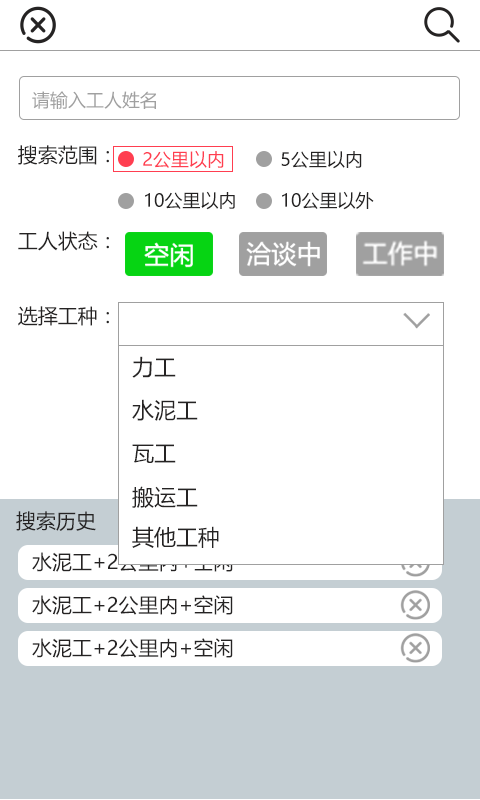
<style>
.page{position:relative;width:480px;height:800px;background:#ffffff}
.page>*{position:absolute;margin:0}
.t1{font:18px "MicrosoftYaHei";color:#a0a0a0}
.t2{font:20px "MicrosoftYaHei";color:#252323}
.t3{font:18px "MicrosoftYaHei";color:#ff3e50}
.t4{font:18px "MicrosoftYaHei";color:#252323}
.t5{font:22px "MicrosoftYaHei";color:#252323}
.t6{font:20px "MicrosoftYaHei"}
</style>
<div class="page">
<p class="t1" style="left:32px;top:91px;width:124px;height:18px">请输入工人姓名</p>
<p class="t2" style="left:18px;top:145px;width:91px;height:20px">搜索范围：</p>
<p class="t3" style="left:143px;top:150px;width:81px;height:19px">2公里以内</p>
<p class="t4" style="left:281px;top:150px;width:81px;height:19px">5公里以内</p>
<p class="t4" style="left:145px;top:191px;width:90px;height:19px">10公里以内</p>
<p class="t4" style="left:282px;top:191px;width:92px;height:19px">10公里以外</p>
<p class="t2" style="left:18px;top:231px;width:91px;height:20px">工人状态：</p>
<p class="t2" style="left:18px;top:306px;width:91px;height:20px">选择工种：</p>
<p class="t5" style="left:132px;top:356px;width:44px;height:22px">力工</p>
<p class="t5" style="left:132px;top:399px;width:66px;height:22px">水泥工</p>
<p class="t5" style="left:132px;top:444px;width:44px;height:19px">瓦工</p>
<p class="t5" style="left:132px;top:486px;width:66px;height:22px">搬运工</p>
<p class="t2" style="left:16px;top:511px;width:80px;height:20px">搜索历史</p>
<p class="t5" style="left:132px;top:526px;width:87px;height:22px">其他工种</p>
<p class="t6" style="left:32px;top:552px;width:201px;height:20px">水泥工+2公里内+空闲</p>
<p class="t2" style="left:32px;top:595px;width:201px;height:20px">水泥工+2公里内+空闲</p>
<p class="t2" style="left:32px;top:638px;width:201px;height:20px">水泥工+2公里内+空闲</p>
</div>
